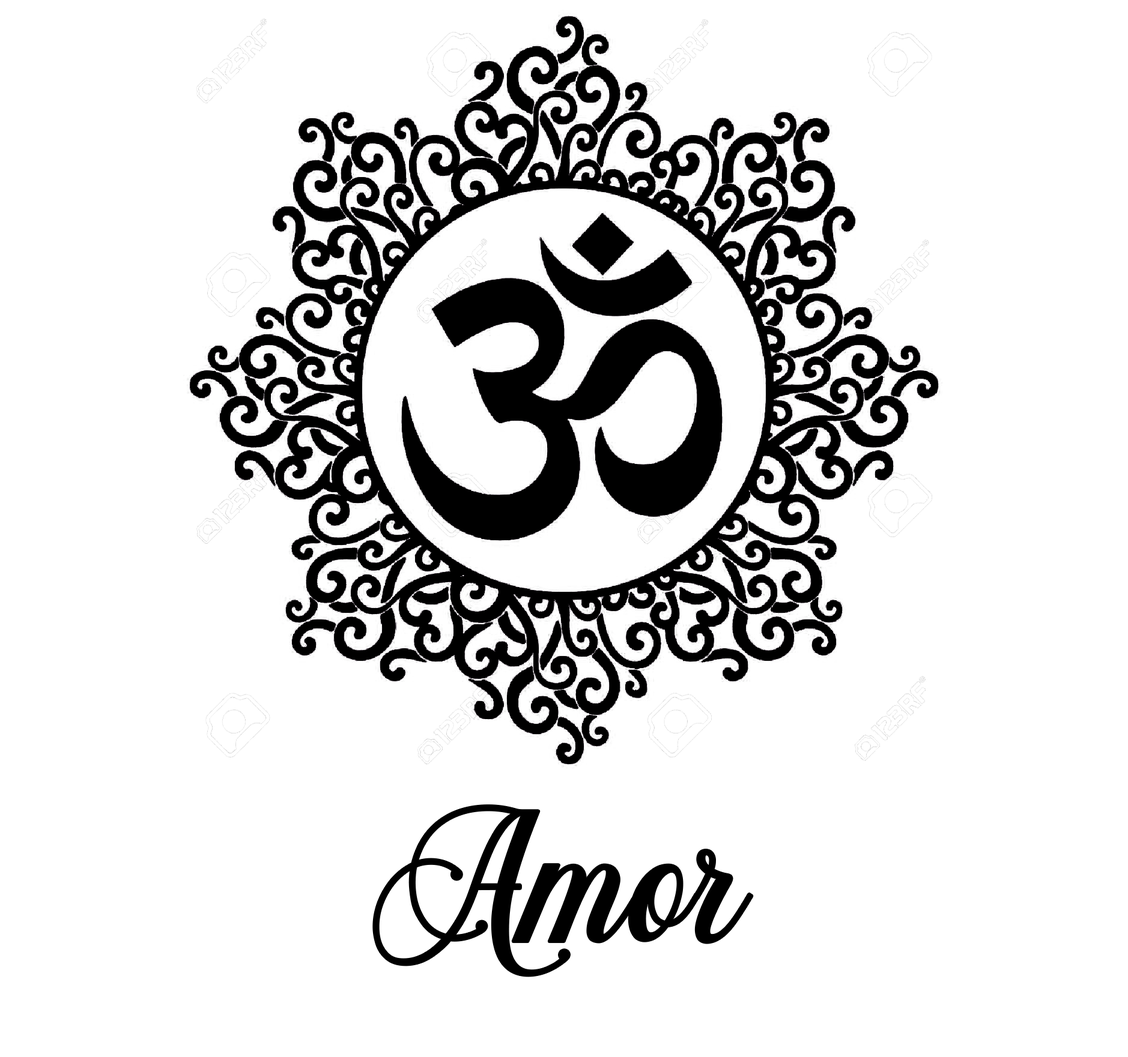
<style>
.page{position:relative;width:1128px;height:1057px;background:#ffffff}
.page>*{position:absolute;margin:0}
.t1{font:187.8px "ChalisaOktavia";color:#000000}
</style>
<div class="page">
<p class="t1" style="left:374px;top:806px;width:378px;height:170px">Amor</p>
</div>
